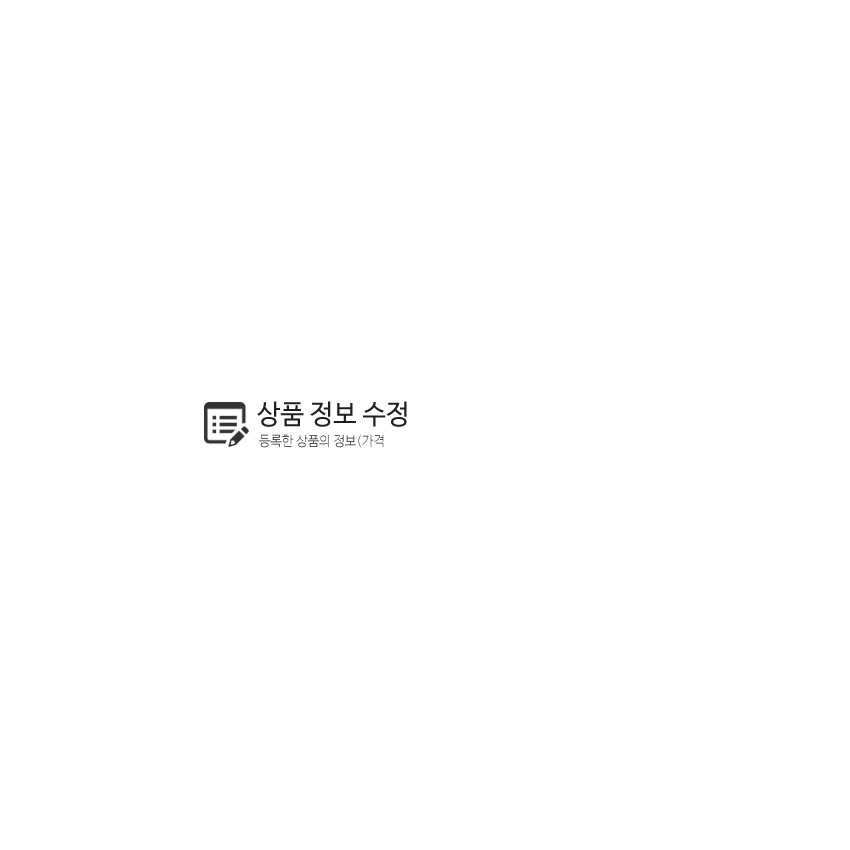
<style>
.page{position:relative;width:850px;height:850px;background:#ffffff}
.page>*{position:absolute;margin:0}
.t1{font:27.5px "NanumBarunGothic";color:#1e1f20;scale:0.96 1}
.t2{font:13.4px "NanumBarunGothicUltraLight";scale:0.96 1}
</style>
<div class="page">
<p class="t1" style="left:257px;top:401px;width:150px;height:26px">상품 정보 수정</p>
<p class="t2" style="left:259px;top:434px;width:125px;height:14px">등록한 상품의 정보(가격</p>
</div>
